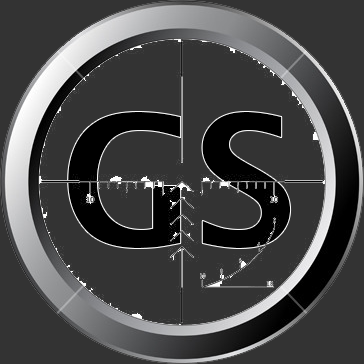
<style>
.page{position:relative;width:364px;height:364px;background:#333333}
.page>*{position:absolute;margin:0}
.t1{font:180px "LucidaSans-Demi";color:#000000}
</style>
<div class="page">
<p class="t1" style="left:68px;top:112px;width:223px;height:136px">GS</p>
</div>
